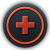
<style>
.page{position:relative;width:50px;height:50px}
.page>*{position:absolute;margin:0}
.t1{font:35.3px "Futura-Bold";letter-spacing:-0.045em;color:#ae3726}
</style>
<div class="page">
<p class="t1" style="left:16px;top:16px;width:19px;height:18px">+</p>
</div>
